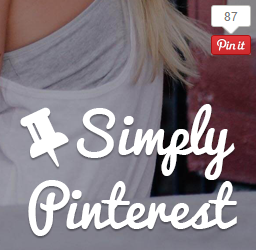
<style>
.page{position:relative;width:256px;height:250px}
.page>*{position:absolute;margin:0}
.t1{font:54.8px/74.9px "Pacifico";color:#ffffff}
.t2{font:54.8px "Pacifico";color:#ffffff}
</style>
<div class="page">
<p class="t1" style="left:28px;top:104px;width:209px;height:132px"><span class="t2">   Simply<br></span>Pinterest</p>
</div>
